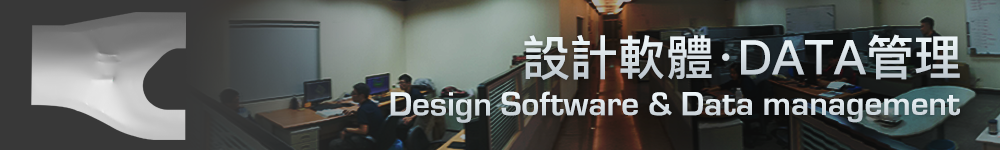
<style>
.page{position:relative;width:1000px;height:150px}
.page>*{position:absolute;margin:0}
.t1{font:48px "PingFangTC-Medium";color:#d8e0e5}
.t2{font:35px "EurostileBold";color:#d8e1e6}
</style>
<div class="page">
<p class="t1" style="left:524px;top:34px;width:436px;height:46px">設計軟體‧DATA管理</p>
<p class="t2" style="left:390px;top:91px;width:570px;height:32px">Design Software &amp; Data management</p>
</div>
